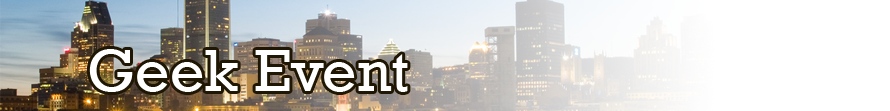
<style>
.page{position:relative;width:890px;height:111px;background:#ffffff}
.page>*{position:absolute;margin:0}
.t1{font:60px "Rockwell";color:#ffffff}
</style>
<div class="page">
<p class="t1" style="left:89px;top:49px;width:319px;height:43px">Geek Event</p>
</div>
